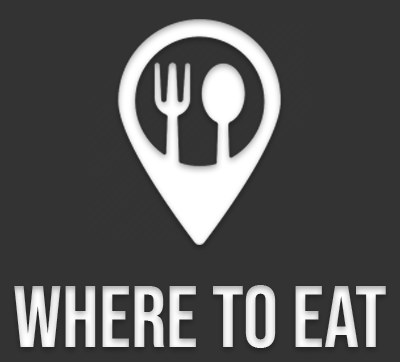
<style>
.page{position:relative;width:400px;height:362px;background:#333333}
.page>*{position:absolute;margin:0}
.t1{font:87.5px "BebasNeue-Regular";color:#ffffff}
</style>
<div class="page">
<p class="t1" style="left:14px;top:285px;width:372px;height:63px">where to eat</p>
</div>
